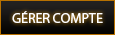
<style>
.page{position:relative;width:115px;height:35px}
.page>*{position:absolute;margin:0}
.t1{font:14px "MyriadPro-Regular";color:#ffffff}
</style>
<div class="page">
<p class="t1" style="left:12px;top:11px;width:91px;height:12px">GÉRER COMPTE</p>
</div>
